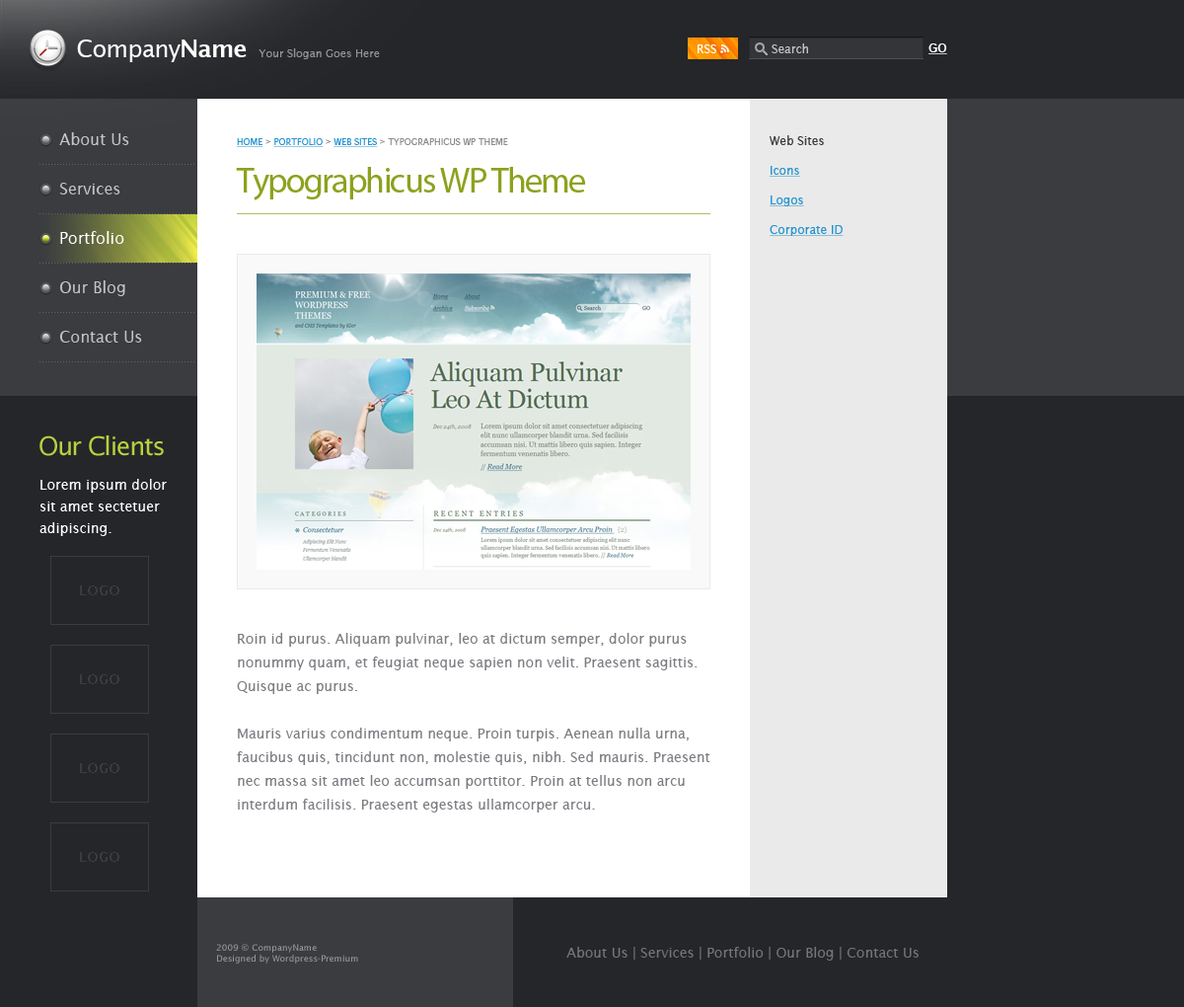
<style>
.page{position:relative;width:1184px;height:1007px;background:#242629}
.page>*{position:absolute;margin:0}
.t1{font:23.7px "LucidaSans";letter-spacing:-0.025em;color:#ffffff}
.t2{font:23.7px "LucidaSans-Demi";letter-spacing:-0.025em;color:#ffffff}
.t3{font:10.9px "LucidaSans";color:#929395}
.t4{font:11.8px "LucidaSans";color:#ffffff}
.t5{font:11.8px "LucidaSans";color:#c2c3c4}
.t6{font:15.8px/49.4px "LucidaSans";color:#c4c5c6}
.t7{font:11.8px/29.6px "LucidaSans";color:#2895ce;text-decoration:underline}
.t8{font:11.8px/29.6px "LucidaSans";color:#3a3c3f}
.t9{font:8.9px "LucidaSans";color:#8d8d8e;text-transform:uppercase}
.t10{font:8.9px "LucidaSans";color:#2895ce;text-transform:uppercase;text-decoration:underline}
.t11{font:35.5px "MyriadPro-Regular";letter-spacing:-0.05em;color:#8ca21e}
.t12{font:15.8px "LucidaSans";color:#fefefe}
.t13{font:25.7px "LucidaSans";letter-spacing:-0.05em;color:#b8d13e}
.t14{font:13.8px/21.7px "LucidaSans";color:#ffffff}
.t15{font:13.8px/23.7px "LucidaSans";color:#7b7d82}
.t16{font:8.9px "LucidaSans";color:#979798}
.t17{font:13.8px "LucidaSans";color:#757577}
</style>
<div class="page">
<p class="t1" style="left:77px;top:39px;width:170px;height:23px">Company<span class="t2">Name</span></p>
<p class="t3" style="left:259px;top:48px;width:121px;height:11px">Your Slogan Goes Here</p>
<p class="t4" style="left:698px;top:44px;width:19px;height:9px">RSS</p>
<p class="t5" style="left:772px;top:43px;width:36px;height:10px">Search</p>
<p class="t6" style="left:59px;top:132px;width:83px;height:210px">About Us<br>Services<br><br>Our Blog<br>Contact Us</p>
<p class="t7" style="left:769px;top:135px;width:75px;height:101px"><span class="t8">Web Sites<br></span>Icons<br>Logos<br>Corporate ID</p>
<p class="t9" style="left:237px;top:138px;width:271px;height:9px"><span class="t10">Home</span> &gt; <span class="t10">Portfolio</span> &gt; <span class="t10">Web sites</span> &gt; Typographicus wp Theme</p>
<p class="t11" style="left:236px;top:167px;width:349px;height:33px">Typographicus WP Theme</p>
<p class="t12" style="left:60px;top:231px;width:64px;height:13px">Portfolio</p>
<p class="t13" style="left:39px;top:435px;width:125px;height:21px">Our Clients</p>
<p class="t14" style="left:39px;top:479px;width:128px;height:57px">Lorem ipsum dolor sit amet sectetuer adipiscing.</p>
<p class="t15" style="left:237px;top:633px;width:474px;height:179px">Roin id purus. Aliquam pulvinar, leo at dictum semper, dolor purus nonummy quam, et feugiat neque sapien non velit. Praesent sagittis. Quisque ac purus. <br><br>Mauris varius condimentum neque. Proin turpis. Aenean nulla urna, faucibus quis, tincidunt non, molestie quis, nibh. Sed mauris. Praesent nec massa sit amet leo accumsan porttitor. Proin at tellus non arcu interdum facilisis. Praesent egestas ullamcorper arcu. <br><br>Maecenas sit amet turpis. Aliquam pretium quam ac pede. Mauris eget orci id leo rhoncus volutpat. Nullam auctor lorem. Duis id eros sed dolor fringilla lobortis. Etiam ornare. Donec imperdiet turpis vulputate massa tempor laoreet. Pellentesque habitant morbi tristique senectus et netus et malesuada fames ac turpis egestas. Nam tempor lorem sed lorem.</p>
<p class="t16" style="left:216px;top:944px;width:142px;height:19px">2009 © CompanyName<br>Designed by Wordpress-Premium</p>
<p class="t17" style="left:567px;top:947px;width:352px;height:13px">About Us | Services | Portfolio | Our Blog | Contact Us</p>
</div>
